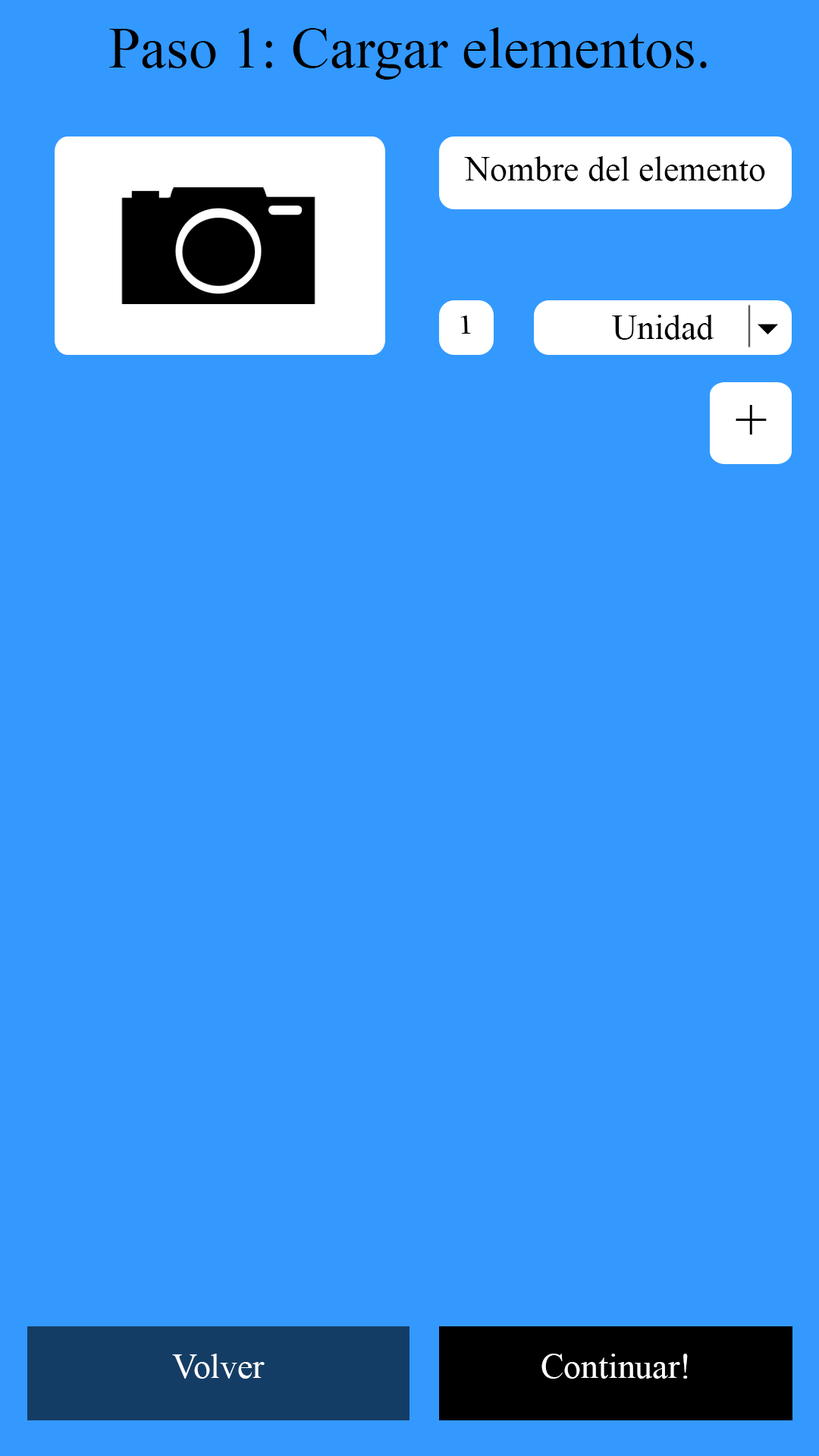
<style>
.page{position:relative;width:819px;height:1456px;background:#3399ff}
.page>*{position:absolute;margin:0}
.t1{font:57.8px "TimesNewRomanPSMT";color:#000000}
.t2{font:34.7px "TimesNewRomanPSMT";color:#000000}
.t3{font:27.4px "TimesNewRomanPSMT";color:#000000;scale:1.26 1}
.t4{font:34.7px "TimesNewRomanPSMT";color:#ffffff}
</style>
<div class="page">
<p class="t1" style="left:109px;top:27px;width:598px;height:53px">Paso 1: Cargar elementos.</p>
<p class="t2" style="left:464px;top:156px;width:301px;height:25px">Nombre del elemento</p>
<p class="t3" style="left:460px;top:315px;width:11px;height:19px">1</p>
<p class="t2" style="left:612px;top:315px;width:102px;height:25px">Unidad</p>
<p class="t1" style="left:736px;top:405px;width:31px;height:30px">+</p>
<p class="t4" style="left:172px;top:1354px;width:93px;height:25px">Volver</p>
<p class="t4" style="left:541px;top:1354px;width:147px;height:25px">Continuar!</p>
</div>
